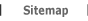
<style>
.page{position:relative;width:88px;height:21px;background:#ffffff}
.page>*{position:absolute;margin:0}
.t1{font:12px "Verdana-Bold";letter-spacing:0.01em;color:#333333}
.t2{font:12.1px "Verdana-Bold";color:#666666;scale:0.82 1}
.t3{font:12px "Verdana-Bold";letter-spacing:0.01em}
</style>
<div class="page">
<p class="t1" style="left:0px;top:4px;width:2px;height:12px">|</p>
<p class="t2" style="left:23px;top:5px;width:45px;height:12px">Sitemap</p>
<p class="t3" style="left:87px;top:4px;width:3px;height:12px">|</p>
</div>
